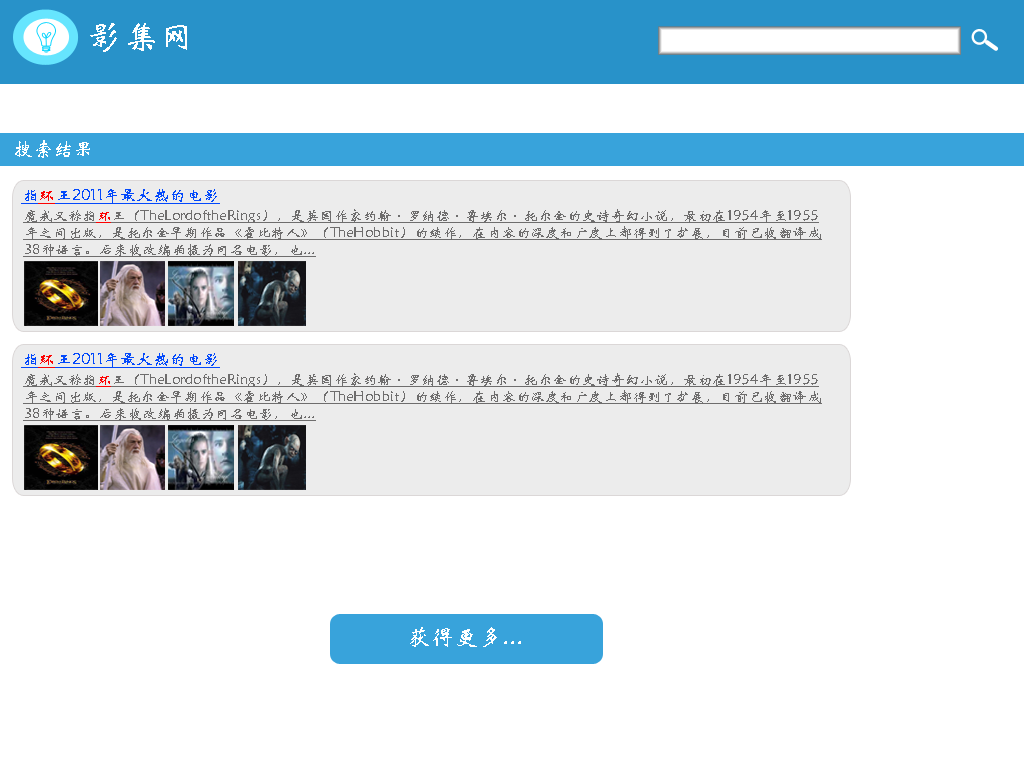
<style>
.page{position:relative;width:1024px;height:768px;background:#ffffff}
.page>*{position:absolute;margin:0}
.t1{font:36px "STXinwei";color:#ffffff}
.t2{font:20px "STXinwei";color:#ffffff}
.t3{font:16px "STXinwei";color:#0349fb;text-decoration:underline;scale:1.04 1}
.t4{font:16px "STXinwei";color:#fb0303;text-decoration:underline;scale:1.04 1}
.t5{font:14px "STXinwei";color:#6e6d6d;text-decoration:underline;scale:1.04 1}
.t6{font:14px "STXinwei";color:#fd0202;text-decoration:underline;scale:1.04 1}
.t7{font:24px "STXinwei";color:#ffffff}
</style>
<div class="page">
<p class="t1" style="left:90px;top:23px;width:97px;height:29px">影集网</p>
<p class="t2" style="left:15px;top:140px;width:75px;height:18px">搜索结果</p>
<p class="t3" style="left:21px;top:189px;width:199px;height:15px">指<span class="t4">环</span>王2011年最火热的电影</p>
<p class="t5" style="left:23px;top:209px;width:799px;height:48px">魔戒又称指<span class="t6">环</span>王（TheLordoftheRings），是英国作家约翰·罗纳德·鲁埃尔·托尔金的史诗奇幻小说，最初在1954年至1955年之间出版，是托尔金早期作品《霍比特人》（TheHobbit）的续作，在内容的深度和广度上都得到了扩展，目前已被翻译成38种语言。后来被改编拍摄为同名电影，也...</p>
<p class="t3" style="left:21px;top:353px;width:199px;height:15px">指<span class="t4">环</span>王2011年最火热的电影</p>
<p class="t5" style="left:23px;top:373px;width:799px;height:48px">魔戒又称指<span class="t6">环</span>王（TheLordoftheRings），是英国作家约翰·罗纳德·鲁埃尔·托尔金的史诗奇幻小说，最初在1954年至1955年之间出版，是托尔金早期作品《霍比特人》（TheHobbit）的续作，在内容的深度和广度上都得到了扩展，目前已被翻译成38种语言。后来被改编拍摄为同名电影，也...</p>
<p class="t7" style="left:410px;top:627px;width:111px;height:20px">获得更多...</p>
</div>
